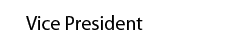
<style>
.page{position:relative;width:240px;height:51px;background:#ffffff}
.page>*{position:absolute;margin:0}
.t1{font:20px "MyriadPro-Regular";color:#000000}
</style>
<div class="page">
<p class="t1" style="left:26px;top:15px;width:117px;height:15px">Vice President</p>
</div>
